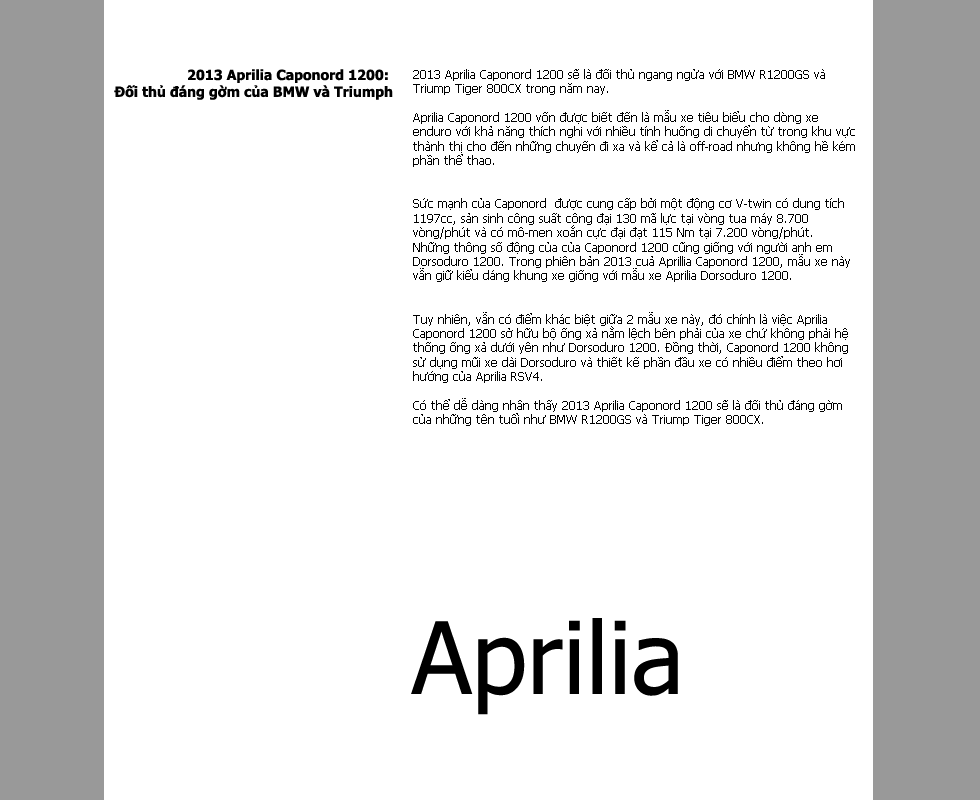
<style>
.page{position:relative;width:980px;height:800px;background:#ffffff}
.page>*{position:absolute;margin:0}
.t1{font:14px "Tahoma-Bold";color:#000000}
.t2{font:12px "Tahoma";color:#000000}
.t3{font:100px "Tahoma";color:#000000}
</style>
<div class="page">
<p class="t1" style="left:114px;top:69px;width:279px;height:31px;text-align:right">2013 Aprilia Caponord 1200: <br>Đối thủ đáng gờm của BMW và Triumph</p>
<p class="t2" style="left:413px;top:69px;width:442px;height:357px">2013 Aprilia Caponord 1200 sẽ là đối thủ ngang ngửa với BMW R1200GS và <br>Triump Tiger 800CX trong năm nay.<br><br>Aprilia Caponord 1200 vốn được biết đến là mẫu xe tiêu biểu cho dòng xe <br>enduro với khả năng thích nghi với nhiều tính huống di chuyển từ trong khu vực <br>thành thị cho đến những chuyến đi xa và kể cả là off-road nhưng không hề kém <br>phần thể thao.<br><br><br>Sức mạnh của Caponord  được cung cấp bởi một động cơ V-twin có dung tích <br>1197cc, sản sinh công suất công đại 130 mã lực tại vòng tua máy 8.700 <br>vòng/phút và có mô-men xoắn cực đại đạt 115 Nm tại 7.200 vòng/phút.  <br>Những thông số động của của Caponord 1200 cũng giống với người anh em <br>Dorsoduro 1200. Trong phiên bản 2013 cuả Aprillia Caponord 1200, mẫu xe này <br>vẫn giữ kiểu dáng khung xe giống với mẫu xe Aprilia Dorsoduro 1200.<br><br><br>Tuy nhiên, vẫn có điểm khác biệt giữa 2 mẫu xe này, đó chính là việc Aprilia <br>Caponord 1200 sở hữu bộ ống xả nằm lệch bên phải của xe chứ không phải hệ <br>thống ống xả dưới yên như Dorsoduro 1200. Đồng thời, Caponord 1200 không <br>sử dụng mũi xe dài Dorsoduro và thiết kế phần đầu xe có nhiều điểm theo hơi <br>hướng của Aprilia RSV4.<br><br>Có thể dễ dàng nhân thấy 2013 Aprilia Caponord 1200 sẽ là đối thủ đáng gờm <br>của những tên tuổi như BMW R1200GS và Triump Tiger 800CX.</p>
<p class="t3" style="left:411px;top:618px;width:267px;height:97px">Aprilia</p>
</div>
